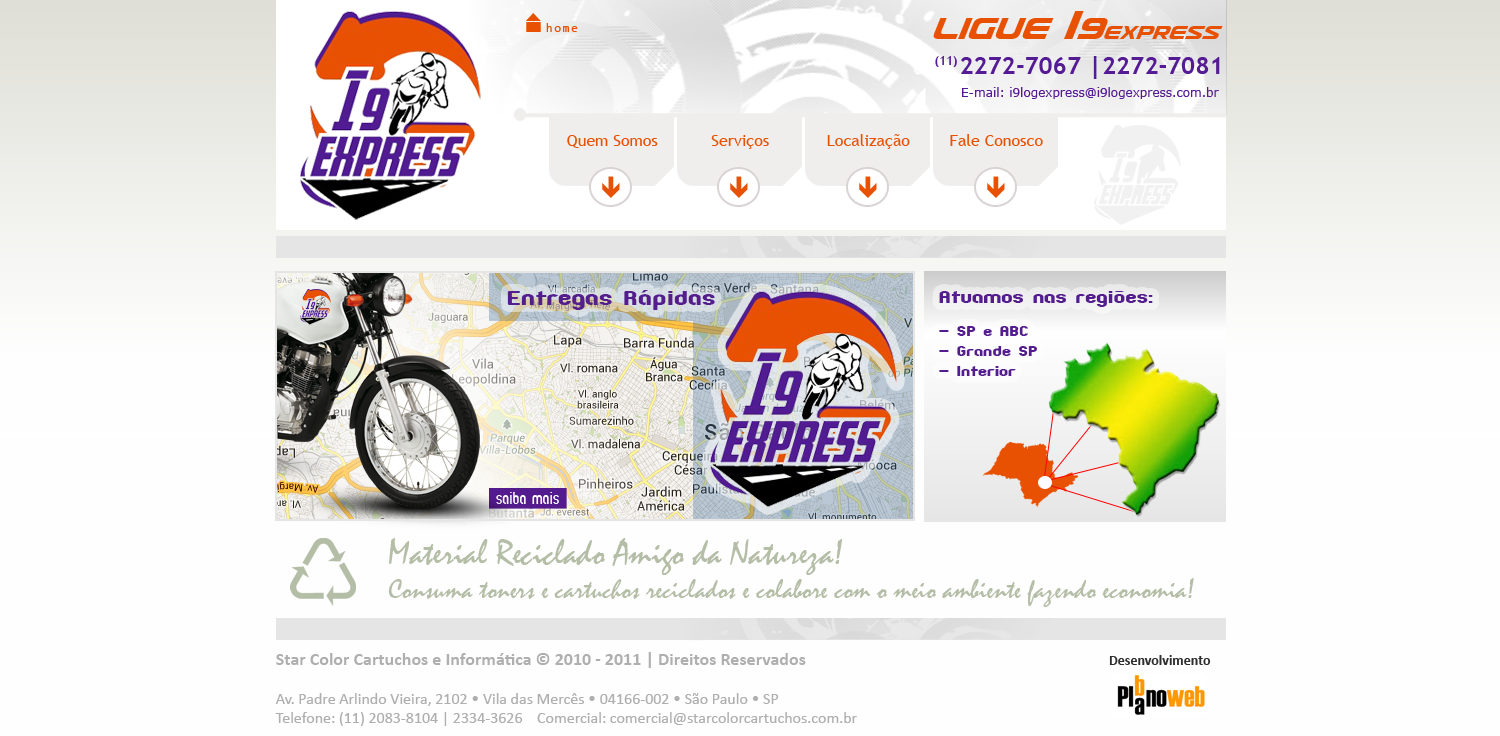
<style>
.page{position:relative;width:1500px;height:736px;background:#fefefe}
.page>*{position:absolute;margin:0}
.t1{font:22px "UsuziItalic";color:#e85102}
.t2{font:36px "UsuziItalic";color:#e85102}
.t3{font:48px "UsuziItalic";color:#e85102}
.t4{font:14px "OCRB10PitchBT-Regular";color:#e85102}
.t5{font:12px "TrebuchetMS-Bold";color:#541b94}
.t6{font:24px "TrebuchetMS-Bold";color:#541b94}
.t7{font:12px "Verdana";color:#541b94}
.t8{font:16px "TrebuchetMS";color:#e85102}
.t9{font:24px "ZillahModernExpanded";color:#531d8d}
.t10{font:20px "ZillahModernExpanded";color:#531d8d}
.t11{font:16px "ZillahModernExpanded";color:#531d8d}
.t12{font:19.9px "ZillahModernThin";color:#ffffff}
.t13{font:28px "Mistral";color:#b4bda6}
.t14{font:36px "Mistral";color:#b4bda6}
.t15{font:16px "Calibri";color:#b0afaf}
.t16{font:18px "Calibri-Bold";color:#b0afaf}
.t17{font:14px "Calibri-Bold";color:#2f2e2e}
</style>
<div class="page">
<p class="t1" style="left:933px;top:11px;width:290px;height:28px"><span class="t2">Ligue </span><span class="t3">I</span><span class="t2">9</span>express</p>
<p class="t4" style="left:546px;top:23px;width:32px;height:9px">home</p>
<p class="t5" style="left:935px;top:56px;width:22px;height:11px">(11)</p>
<p class="t6" style="left:961px;top:56px;width:259px;height:23px">2272-7067 |2272-7081</p>
<p class="t7" style="left:962px;top:87px;width:257px;height:12px">E-mail: i9logexpress@i9logexpress.com.br</p>
<p class="t8" style="left:567px;top:135px;width:91px;height:13px">Quem Somos</p>
<p class="t8" style="left:711px;top:135px;width:58px;height:14px">Serviços</p>
<p class="t8" style="left:827px;top:134px;width:83px;height:15px">Localização</p>
<p class="t8" style="left:950px;top:134px;width:93px;height:12px">Fale Conosco</p>
<p class="t9" style="left:507px;top:290px;width:208px;height:20px">Entregas Rápidas</p>
<p class="t10" style="left:939px;top:291px;width:214px;height:16px">Atuamos nas regiões:</p>
<p class="t11" style="left:939px;top:326px;width:89px;height:10px">- SP e ABC</p>
<p class="t11" style="left:939px;top:346px;width:98px;height:10px">- Grande SP</p>
<p class="t11" style="left:939px;top:366px;width:77px;height:10px">- Interior</p>
<p class="t12" style="left:496px;top:492px;width:63px;height:12px">saiba mais</p>
<p class="t13" style="left:388px;top:538px;width:806px;height:69px"><span class="t14">Material Reciclado Amigo da Natureza!<br></span>Consuma toners e cartuchos reciclados e colabore com o meio ambiente fazendo economia!</p>
<p class="t15" style="left:275px;top:652px;width:582px;height:74px"><span class="t16">Star Color Cartuchos e Informática © 2010 - 2011 | Direitos Reservados</span><br><br>Av. Padre Arlindo Vieira, 2102 • Vila das Mercês • 04166-002 • São Paulo • SP<br>Telefone: (11) 2083-8104 | 2334-3626    Comercial: comercial@starcolorcartuchos.com.br</p>
<p class="t17" style="left:1109px;top:655px;width:102px;height:10px">Desenvolvimento</p>
</div>
